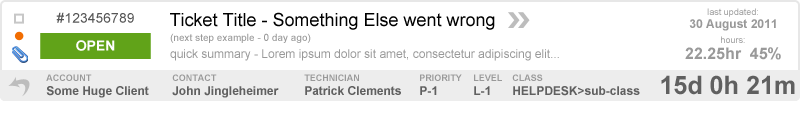
<style>
.page{position:relative;width:800px;height:115px;background:#ffffff}
.page>*{position:absolute;margin:0}
.t1{font:14px "ArialMT";color:#565656}
.t2{font:18px "ArialMT";color:#000000}
.t3{font:9px "ArialMT";color:#999999}
.t4{font:12px "Arial-BoldMT";color:#999999}
.t5{font:14px "Arial-BoldMT";color:#fefefe}
.t6{font:10px "ArialMT";color:#999999}
.t7{font:12px "ArialMT";color:#999999}
.t8{font:16px "Arial-BoldMT";color:#999999}
.t9{font:9px "Arial-BoldMT";color:#999999}
.t10{font:25.2px "Arial-BoldMT";color:#606060}
.t11{font:12px "Arial-BoldMT";color:#606060}
</style>
<div class="page">
<p class="t1" style="left:56px;top:12px;width:78px;height:11px">#123456789</p>
<p class="t2" style="left:170px;top:12px;width:325px;height:18px">Ticket Title - Something Else went wrong</p>
<p class="t3" style="left:707px;top:8px;width:51px;height:9px">last updated:</p>
<p class="t4" style="left:689px;top:19px;width:87px;height:12px">30 August 2011</p>
<p class="t5" style="left:76px;top:40px;width:39px;height:11px">OPEN</p>
<p class="t6" style="left:170px;top:33px;width:141px;height:10px">(next step example - 0 day ago)</p>
<p class="t3" style="left:721px;top:36px;width:24px;height:7px">hours:</p>
<p class="t7" style="left:170px;top:49px;width:389px;height:12px">quick summary - Lorem ipsum dolor sit amet, consectetur adipiscing elit...</p>
<p class="t8" style="left:685px;top:47px;width:96px;height:13px">22.25hr  45%</p>
<p class="t9" style="left:46px;top:74px;width:46px;height:7px">ACCOUNT</p>
<p class="t9" style="left:172px;top:74px;width:45px;height:7px">CONTACT</p>
<p class="t9" style="left:304px;top:74px;width:55px;height:7px">TECHNICIAN</p>
<p class="t9" style="left:420px;top:74px;width:42px;height:7px">PRIORITY</p>
<p class="t9" style="left:474px;top:74px;width:28px;height:7px">LEVEL</p>
<p class="t9" style="left:512px;top:74px;width:31px;height:7px">CLASS</p>
<p class="t10" style="left:661px;top:75px;width:134px;height:20px">15d 0h 21m</p>
<p class="t11" style="left:46px;top:86px;width:103px;height:12px">Some Huge Client</p>
<p class="t11" style="left:172px;top:86px;width:107px;height:12px">John Jingleheimer</p>
<p class="t11" style="left:305px;top:86px;width:96px;height:9px">Patrick Clements</p>
<p class="t11" style="left:420px;top:86px;width:17px;height:9px">P-1</p>
<p class="t11" style="left:474px;top:86px;width:16px;height:9px">L-1</p>
<p class="t11" style="left:513px;top:86px;width:127px;height:10px">HELPDESK&gt;sub-class</p>
</div>
